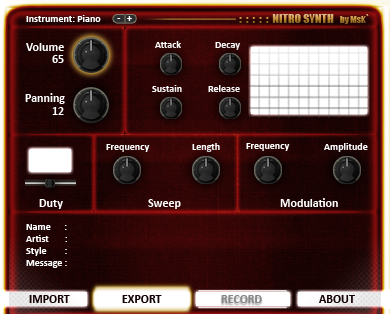
<style>
.page{position:relative;width:390px;height:314px}
.page>*{position:absolute;margin:0}
.t1{font:10px "Calibri-Bold";color:#ffffff}
.t2{font:12px "Impact"}
.t3{font:9px "Impact"}
.t4{font:12px "Calibri-Bold";color:#ffffff}
.t5{font:12px "Calibri-Bold";color:#140202}
.t6{font:12px "Calibri-Bold";color:#878787}
</style>
<div class="page">
<p class="t1" style="left:26px;top:15px;width:75px;height:7px">Instrument: Piano</p>
<p class="t1" style="left:117px;top:16px;width:15px;height:5px">-   +</p>
<p class="t2" style="left:239px;top:14px;width:130px;height:10px">:  :  :  :  :  NITRO SYNTH   <span class="t3">by MsK`</span></p>
<p class="t1" style="left:155px;top:41px;width:26px;height:7px">Attack</p>
<p class="t4" style="left:26px;top:43px;width:38px;height:8px">Volume</p>
<p class="t1" style="left:215px;top:42px;width:25px;height:8px">Decay</p>
<p class="t4" style="left:52px;top:55px;width:12px;height:8px">65</p>
<p class="t1" style="left:152px;top:85px;width:30px;height:7px">Sustain</p>
<p class="t1" style="left:208px;top:85px;width:32px;height:7px">Release</p>
<p class="t4" style="left:25px;top:93px;width:40px;height:11px">Panning</p>
<p class="t4" style="left:52px;top:107px;width:12px;height:8px">12</p>
<p class="t1" style="left:106px;top:144px;width:44px;height:8px">Frequency</p>
<p class="t1" style="left:192px;top:143px;width:28px;height:9px">Length</p>
<p class="t1" style="left:246px;top:143px;width:44px;height:8px">Frequency</p>
<p class="t1" style="left:324px;top:143px;width:44px;height:9px">Amplitude</p>
<p class="t4" style="left:280px;top:198px;width:58px;height:9px">Modulation</p>
<p class="t4" style="left:39px;top:199px;width:24px;height:10px">Duty</p>
<p class="t4" style="left:148px;top:199px;width:33px;height:10px">Sweep</p>
<p class="t1" style="left:26px;top:224px;width:41px;height:44px">Name      : <br>Artist       :<br>Style        :<br>Message :</p>
<p class="t5" style="left:29px;top:295px;width:41px;height:8px">IMPORT</p>
<p class="t5" style="left:122px;top:295px;width:40px;height:8px">EXPORT</p>
<p class="t6" style="left:221px;top:295px;width:41px;height:8px">RECORD</p>
<p class="t5" style="left:319px;top:295px;width:36px;height:8px">ABOUT</p>
</div>
